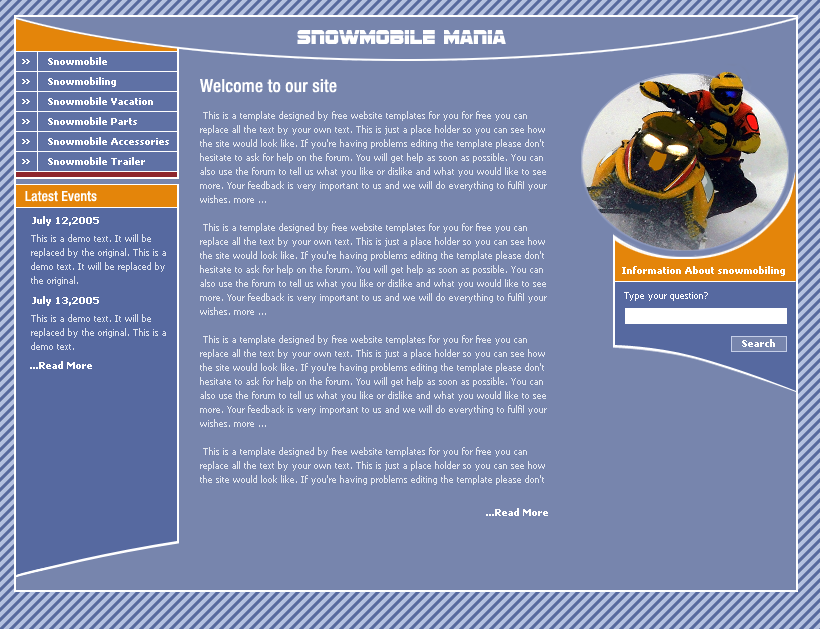
<style>
.page{position:relative;width:820px;height:629px;background:#7785ad}
.page>*{position:absolute;margin:0}
.t1{font:21px "SFSportsNightUpright";color:#ffffff}
.t2{font:10px/20px "Tahoma-Bold";color:#ffffff}
.t3{font:18px "HelveticaNeue-MediumCond";color:#ffffff}
.t4{font:9px/14px "Tahoma";color:#e4e7ef}
.t5{font:14px "HelveticaNeue-MediumCond";color:#ffffff}
.t6{font:10px "Tahoma-Bold";color:#ffffff}
.t7{font:9px/14px "Tahoma";color:#dde1ec}
.t8{font:9px "Tahoma";color:#ffffff}
.t9{font:9px "Tahoma-Bold";color:#ffffff}
</style>
<div class="page">
<p class="t1" style="left:297px;top:30px;width:209px;height:14px">Snowmobile Mania</p>
<p class="t2" style="left:48px;top:57px;width:121px;height:108px">Snowmobile<br>Snowmobiling<br>Snowmobile Vacation<br>Snowmobile Parts<br>Snowmobile Accessories<br>Snowmobile Trailer</p>
<p class="t3" style="left:200px;top:79px;width:137px;height:14px">Welcome to our site</p>
<p class="t4" style="left:200px;top:111px;width:347px;height:374px">This is a template designed by free website templates for you for free you can replace all the text by your own text. This is just a place holder so you can see how the site would look like. If you're having problems editing the template please don't hesitate to ask for help on the forum. You will get help as soon as possible. You can also use the forum to tell us what you like or dislike and what you would like to see more. Your feedback is very important to us and we will do everything to fulfil your wishes. more ...<br><br> This is a template designed by free website templates for you for free you can replace all the text by your own text. This is just a place holder so you can see how the site would look like. If you're having problems editing the template please don't hesitate to ask for help on the forum. You will get help as soon as possible. You can also use the forum to tell us what you like or dislike and what you would like to see more. Your feedback is very important to us and we will do everything to fulfil your wishes. more ...<br><br> This is a template designed by free website templates for you for free you can replace all the text by your own text. This is just a place holder so you can see how the site would look like. If you're having problems editing the template please don't hesitate to ask for help on the forum. You will get help as soon as possible. You can also use the forum to tell us what you like or dislike and what you would like to see more. Your feedback is very important to us and we will do everything to fulfil your wishes. more ...<br><br> This is a template designed by free website templates for you for free you can replace all the text by your own text. This is just a place holder so you can see how the site would look like. If you're having problems editing the template please don't hesitate to ask for help on the forum. You will get help as soon as possible. You can also use the forum to tell us what you like or dislike and what you would like to see more. Your feedback is very important to us and we will do everything to fulfil your wishes. more ...</p>
<p class="t5" style="left:25px;top:191px;width:72px;height:11px">Latest Events</p>
<p class="t6" style="left:32px;top:216px;width:67px;height:10px">July 12,2005</p>
<p class="t7" style="left:31px;top:234px;width:135px;height:52px">This is a demo text. It will be replaced by the original. This is a demo text. It will be replaced by the original.</p>
<p class="t6" style="left:622px;top:266px;width:163px;height:10px">Information About snowmobiling</p>
<p class="t8" style="left:624px;top:292px;width:84px;height:9px">Type your question?</p>
<p class="t6" style="left:32px;top:296px;width:67px;height:10px">July 13,2005</p>
<p class="t7" style="left:31px;top:314px;width:135px;height:36px">This is a demo text. It will be replaced by the original. This is a demo text.</p>
<p class="t9" style="left:742px;top:339px;width:33px;height:8px">Search</p>
<p class="t9" style="left:30px;top:361px;width:62px;height:8px">...Read More</p>
<p class="t9" style="left:486px;top:508px;width:62px;height:8px">...Read More</p>
</div>
